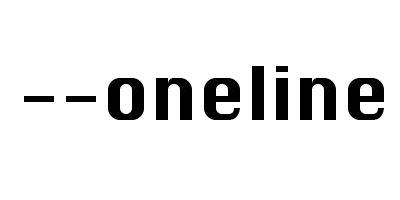
<style>
.page{position:relative;width:400px;height:200px;background:#ffffff}
.page>*{position:absolute;margin:0}
.t1{font:72px "Krungthep";color:#000000}
</style>
<div class="page">
<p class="t1" style="left:24px;top:66px;width:360px;height:54px">--oneline</p>
</div>
